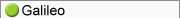
<style>
.page{position:relative;width:180px;height:18px;background:#fafafa}
.page>*{position:absolute;margin:0}
.t1{font:14px "ArialMT";color:#000000}
</style>
<div class="page">
<p class="t1" style="left:22px;top:5px;width:43px;height:11px">Galileo</p>
</div>
